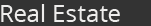
<style>
.page{position:relative;width:151px;height:26px;background:#333333}
.page>*{position:absolute;margin:0}
.t1{font:24px "OpenSans";color:#eeedec}
</style>
<div class="page">
<p class="t1" style="left:1px;top:4px;width:119px;height:18px">Real Estate</p>
</div>
